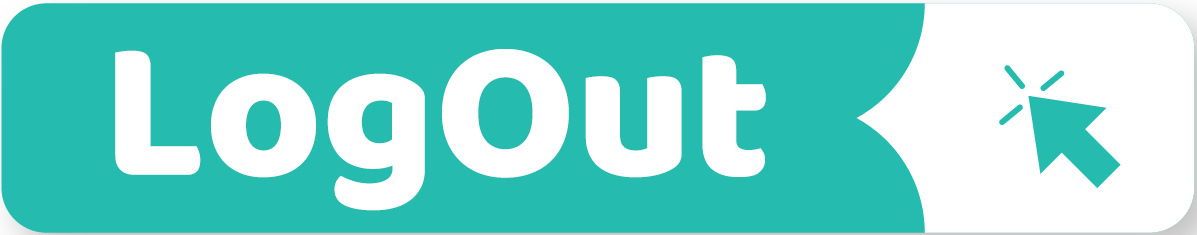
<style>
.page{position:relative;width:1197px;height:235px;background:#25bcaf}
.page>*{position:absolute;margin:0}
.t1{font:200px "BalooDa-Regular";color:#ffffff}
</style>
<div class="page">
<p class="t1" style="left:115px;top:49px;width:651px;height:162px">LogOut</p>
</div>
